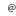
<style>
.page{position:relative;width:16px;height:16px;background:#ffffff}
.page>*{position:absolute;margin:0}
.t1{font:12px "MyriadPro-Regular";color:#666666}
</style>
<div class="page">
<p class="t1" style="left:8px;top:4px;width:8px;height:8px">@</p>
</div>
